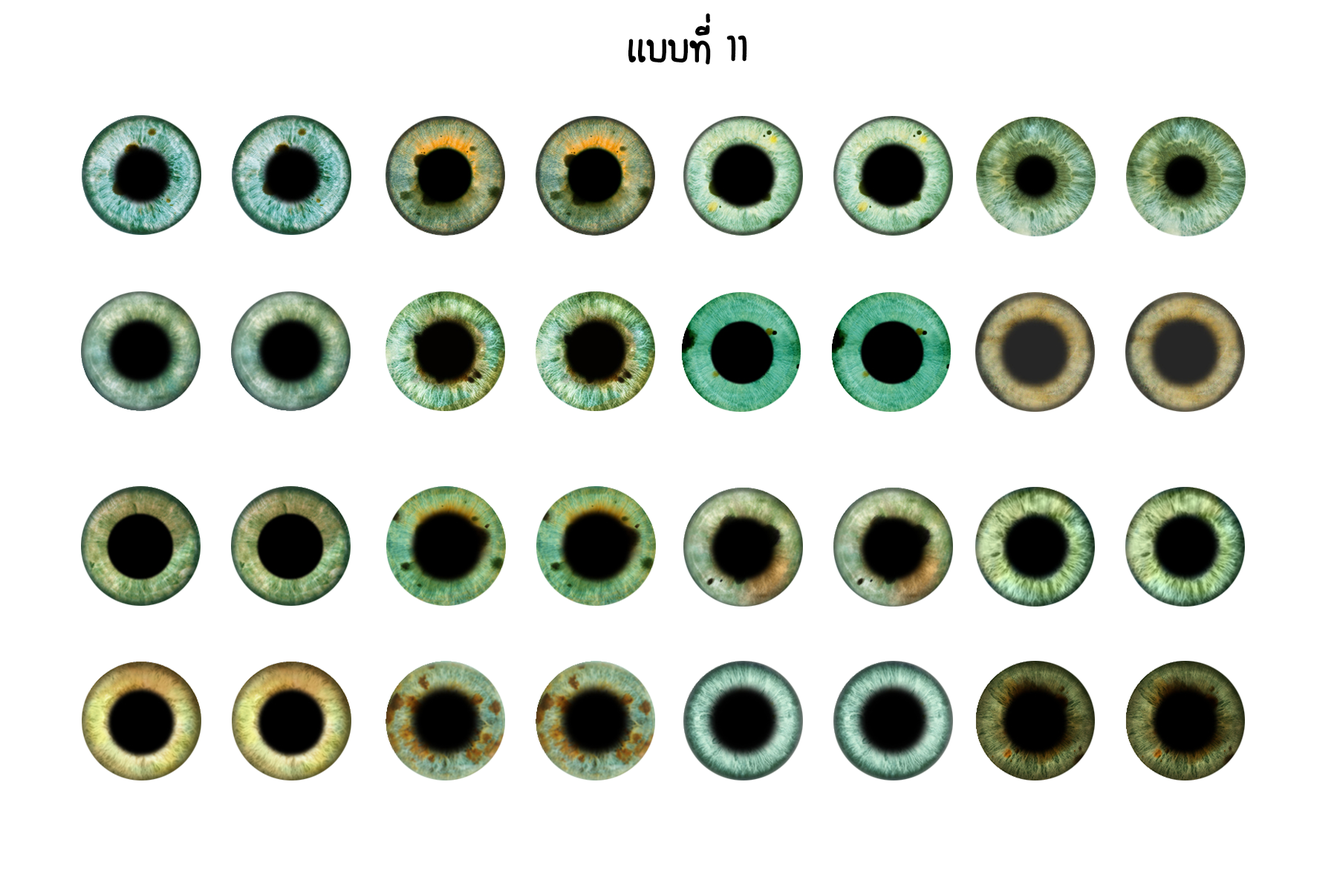
<style>
.page{position:relative;width:1337px;height:892px;background:#ffffff}
.page>*{position:absolute;margin:0}
.t1{font:55.7px "FCDaisyRegular";color:#000000}
</style>
<div class="page">
<p class="t1" style="left:628px;top:13px;width:119px;height:52px">เเบบที่ 11</p>
</div>
